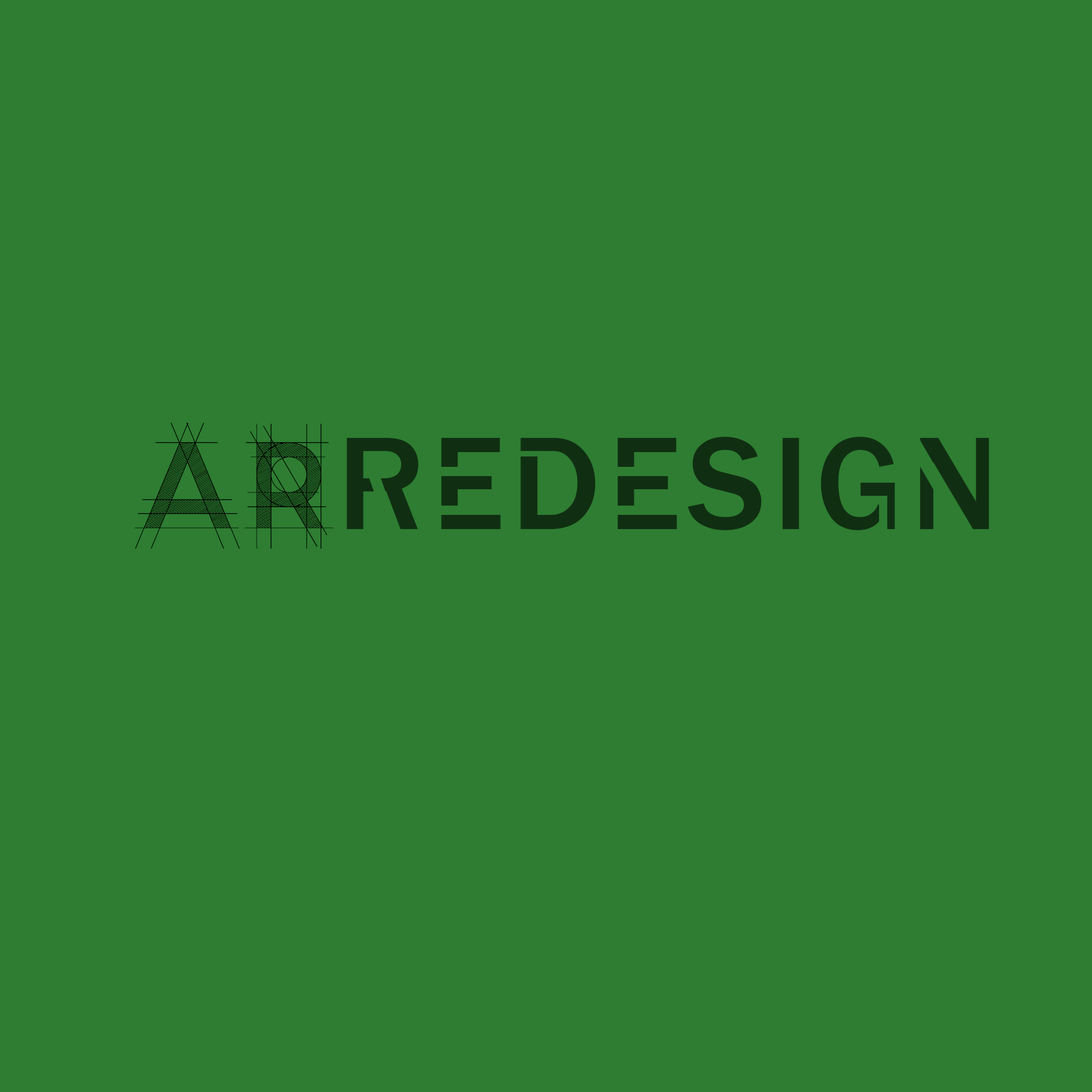
<style>
.page{position:relative;width:1092px;height:1092px;background:#2e7d32}
.page>*{position:absolute;margin:0}
.t1{font:136.5px "R&C-Demo";color:#000000}
.t2{font:136.5px "FranklinGothic-Medium";letter-spacing:0.05em;color:#102f12}
</style>
<div class="page">
<p class="t1" style="left:135px;top:423px;width:199px;height:126px">AR</p>
<p class="t2" style="left:347px;top:437px;width:642px;height:93px">REDESIGN</p>
</div>
